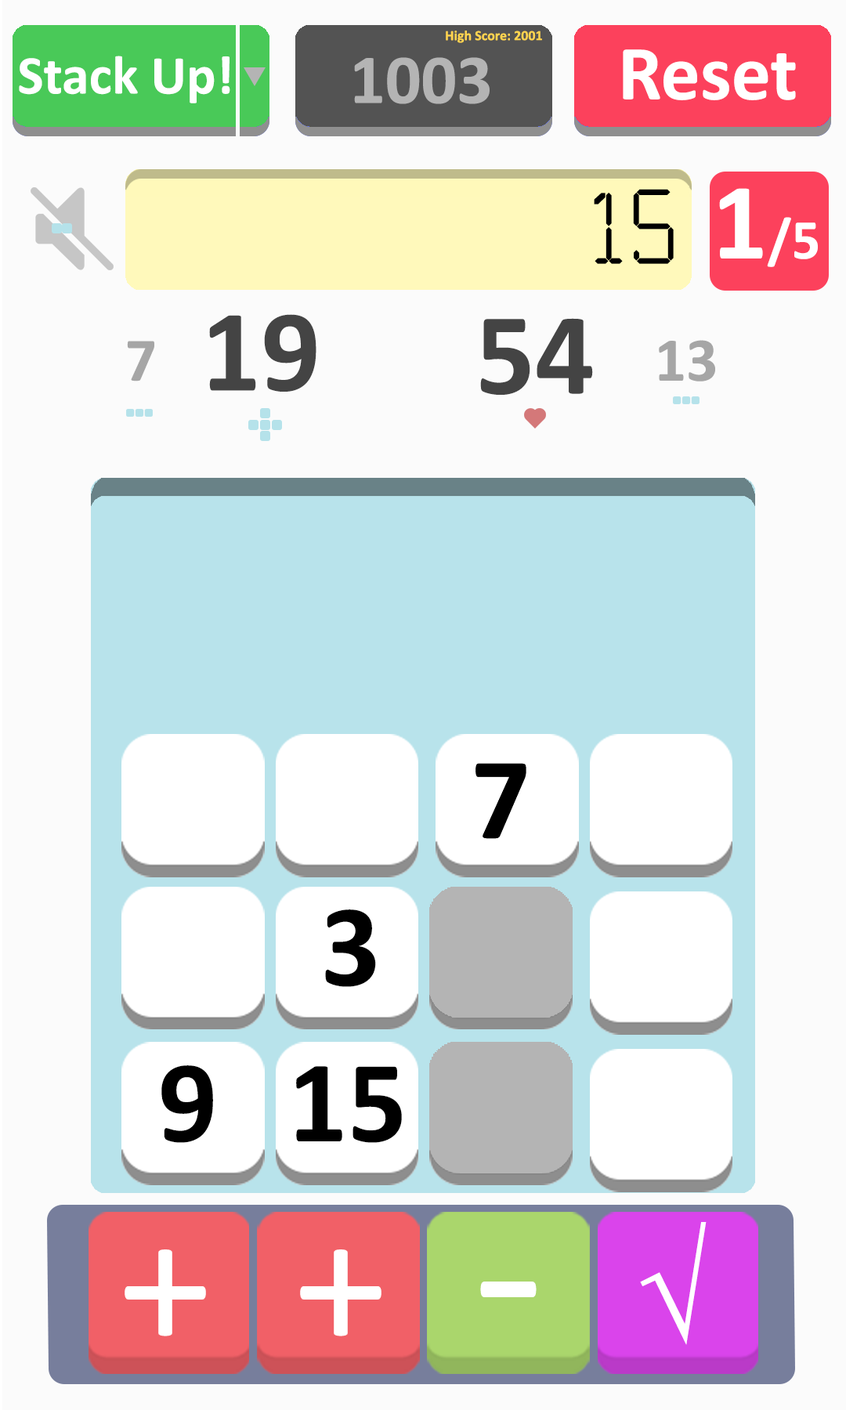
<style>
.page{position:relative;width:846px;height:1410px;background:#fbfbfb}
.page>*{position:absolute;margin:0}
.t1{font:14.1px "Calibri-Bold";color:#ffd44f}
.t2{font:78.3px "Calibri-Bold";color:#ffffff}
.t3{font:54.8px "Calibri-Bold";color:#ffffff}
.t4{font:70.5px "Calibri-Bold";color:#b4b4b4}
.t5{font:117.5px "Calculator";color:#000000}
.t6{font:56.4px "Calibri-Bold";color:#ffffff}
.t7{font:109.6px "Calibri-Bold";color:#ffffff}
.t8{font:117.6px "Calibri-Bold";color:#444444}
.t9{font:62.3px "Calibri-Bold";color:#a6a6a6}
.t10{font:117.6px "Calibri-Bold";color:#000000}
.t11{font:128.7px "TimesNewRomanPSMT";color:#ffffff}
.t12{font:188.3px "Calibri";color:#ffffff}
.t13{font:231.5px "Calibri";color:#ffffff}
</style>
<div class="page">
<p class="t1" style="left:446px;top:31px;width:96px;height:12px">High Score: 2001</p>
<p class="t2" style="left:623px;top:49px;width:173px;height:51px">Reset</p>
<p class="t3" style="left:19px;top:56px;width:211px;height:47px">Stack Up!</p>
<p class="t4" style="left:354px;top:57px;width:135px;height:47px">1003</p>
<p class="t5" style="left:594px;top:189px;width:80px;height:75px">15</p>
<p class="t6" style="left:719px;top:188px;width:99px;height:79px"><span class="t7">1</span>/5</p>
<p class="t8" style="left:209px;top:314px;width:107px;height:78px">19</p>
<p class="t8" style="left:480px;top:318px;width:113px;height:77px">54</p>
<p class="t9" style="left:127px;top:341px;width:27px;height:40px">7</p>
<p class="t9" style="left:659px;top:340px;width:56px;height:41px">13</p>
<p class="t10" style="left:475px;top:763px;width:51px;height:76px">7</p>
<p class="t10" style="left:475px;top:763px;width:51px;height:76px">7</p>
<p class="t10" style="left:325px;top:909px;width:51px;height:78px">3</p>
<p class="t10" style="left:161px;top:1065px;width:52px;height:78px">9</p>
<p class="t10" style="left:296px;top:1066px;width:106px;height:77px">15</p>
<p class="t11" style="left:640px;top:1222px;width:66px;height:123px">√</p>
<p class="t12" style="left:125px;top:1249px;width:81px;height:87px">+</p>
<p class="t12" style="left:300px;top:1249px;width:81px;height:87px">+</p>
<p class="t13" style="left:480px;top:1281px;width:56px;height:16px">-</p>
</div>
